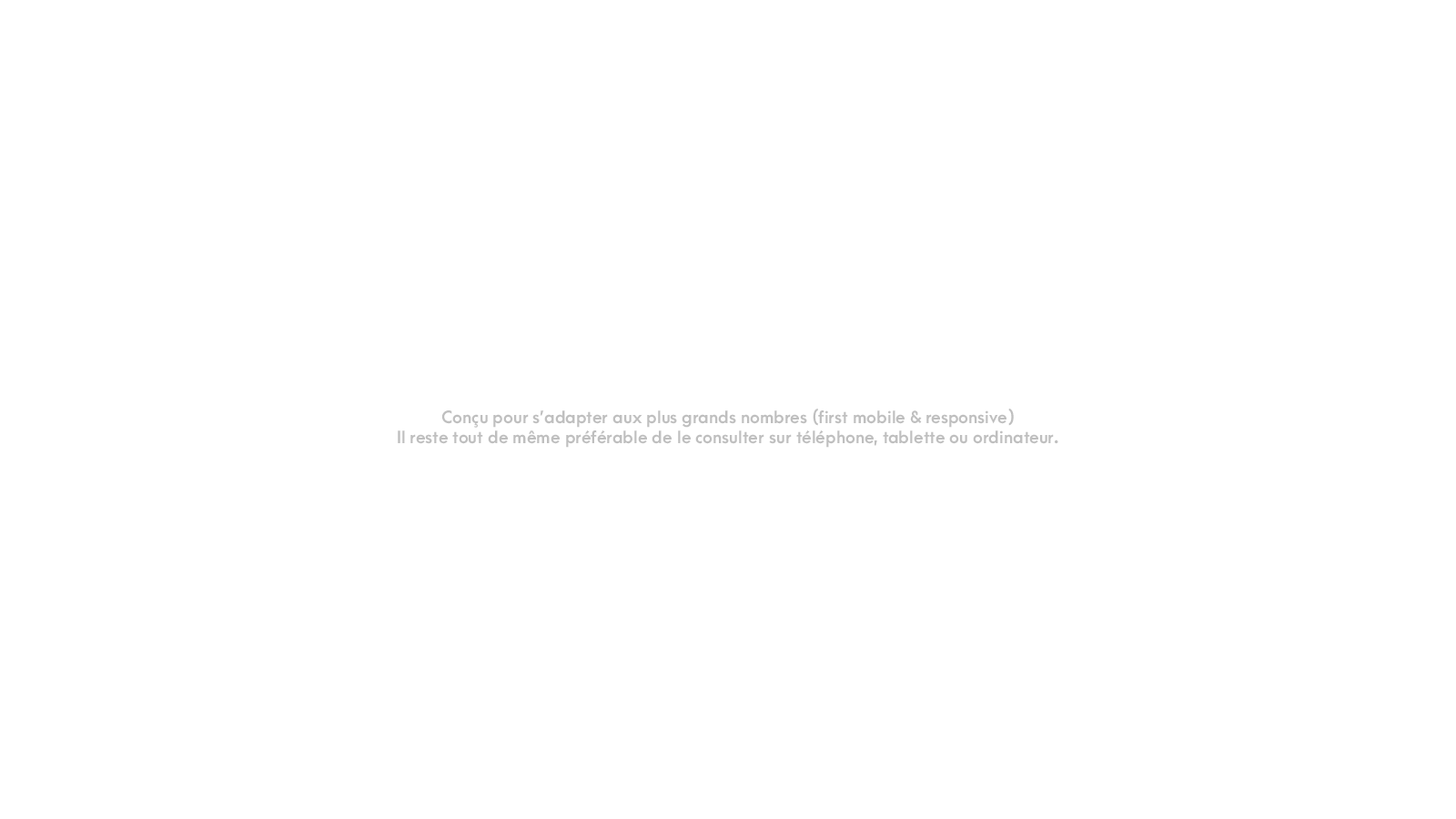
<style>
.page{position:relative;width:1456px;height:819px;background:#ffffff}
.page>*{position:absolute;margin:0}
.t1{font:16.4px/20px "ArcaMajora3-Bold";color:#bfbfbf}
.t2{font:72.8px/32.8px "ArcaMajora3-Heavy";color:#000000}
</style>
<div class="page">
<p class="t1" style="left:398px;top:409px;width:660px;height:39px;text-align:center"><span class="t2"><br><br></span>Conçu pour s’adapter aux plus grands nombres (first mobile &amp; responsive)<br>Il reste tout de même préférable de le consulter sur téléphone, tablette ou ordinateur.</p>
</div>
